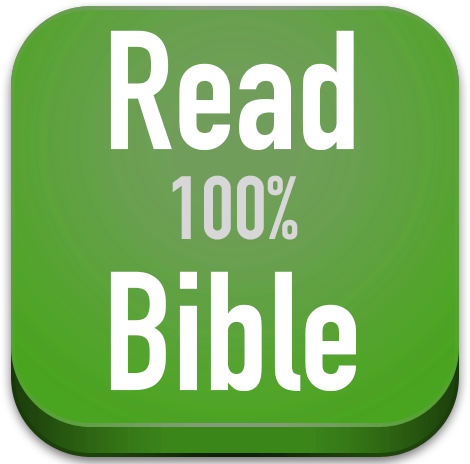
<style>
.page{position:relative;width:470px;height:464px}
.page>*{position:absolute;margin:0}
.t1{font:166px/241px "DINCondensed-Bold";color:#ffffff}
.t2{font:88.3px "DINCondensed-Bold";color:#d8d7d7}
</style>
<div class="page">
<p class="t1" style="left:110px;top:30px;width:246px;height:361px;text-align:center">Read<br>Bible</p>
<p class="t2" style="left:172px;top:175px;width:126px;height:65px">100%</p>
</div>
